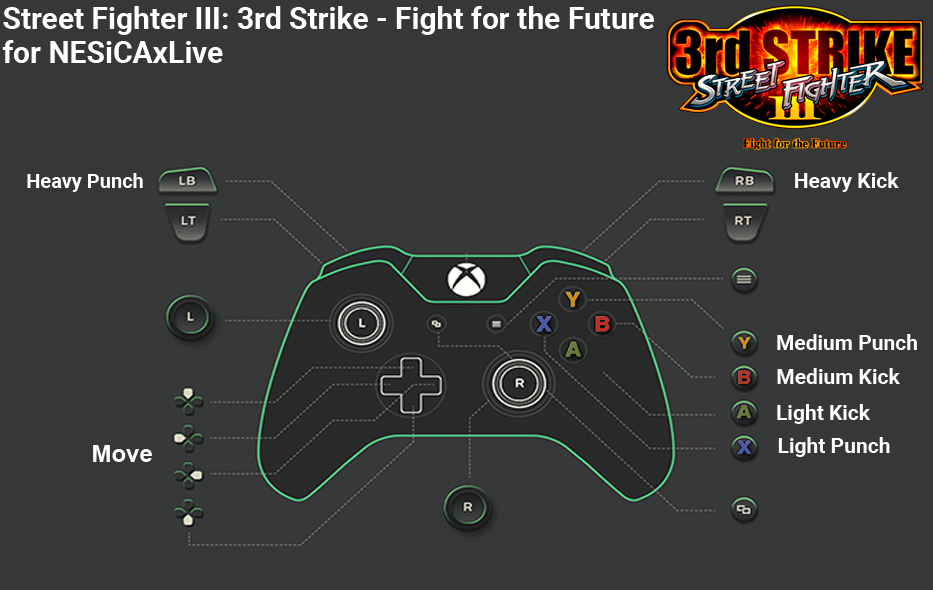
<style>
.page{position:relative;width:933px;height:590px;background:#363838}
.page>*{position:absolute;margin:0}
.t1{font:30px/34px "Roboto-Bold";color:#ffffff}
.t2{font:20px "Roboto-Bold";color:#ffffff}
.t3{font:21px "Roboto-Bold";color:#ffffff}
.t4{font:24px "Arial-BoldMT";color:#fefefe}
</style>
<div class="page">
<p class="t1" style="left:2px;top:6px;width:652px;height:57px">Street Fighter III: 3rd Strike - Fight for the Future <br>for NESiCAxLive</p>
<p class="t2" style="left:27px;top:173px;width:116px;height:19px">Heavy Punch</p>
<p class="t3" style="left:795px;top:172px;width:104px;height:20px">Heavy Kick</p>
<p class="t3" style="left:777px;top:334px;width:140px;height:16px">Medium Punch</p>
<p class="t3" style="left:777px;top:368px;width:123px;height:16px">Medium Kick</p>
<p class="t3" style="left:777px;top:404px;width:94px;height:20px">Light Kick</p>
<p class="t3" style="left:778px;top:437px;width:112px;height:20px">Light Punch</p>
<p class="t4" style="left:93px;top:445px;width:59px;height:17px">Move</p>
</div>
